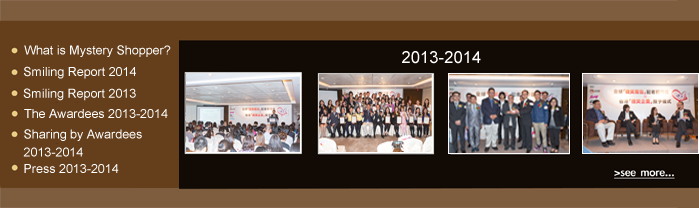
<style>
.page{position:relative;width:699px;height:208px;background:#120b05}
.page>*{position:absolute;margin:0}
.t1{font:12.5px "ArialMT";color:#ffffff}
.t2{font:16.7px "ArialMT";color:#ffffff}
</style>
<div class="page">
<p class="t1" style="left:24px;top:45px;width:147px;height:12px">What is Mystery Shopper?</p>
<p class="t2" style="left:402px;top:51px;width:79px;height:13px">2013-2014</p>
<p class="t1" style="left:24px;top:66px;width:112px;height:13px">Smiling Report 2014</p>
<p class="t1" style="left:23px;top:88px;width:113px;height:13px">Smiling Report 2013</p>
<p class="t1" style="left:24px;top:109px;width:144px;height:9px">The Awardees 2013-2014</p>
<p class="t1" style="left:24px;top:129px;width:118px;height:12px">Sharing by Awardees</p>
<p class="t1" style="left:23px;top:147px;width:60px;height:10px">2013-2014</p>
<p class="t1" style="left:24px;top:164px;width:95px;height:9px">Press 2013-2014</p>
</div>
